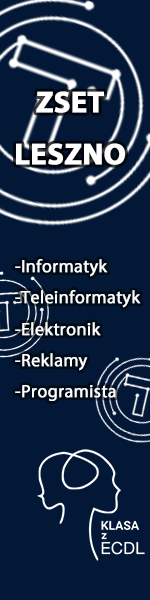
<style>
.page{position:relative;width:150px;height:600px;background:#031837}
.page>*{position:absolute;margin:0}
.t1{font:29.9px "MyriadPro-Bold";color:#ffffff;font-weight:bold}
.t2{font:17.9px "MyriadPro-Regular";color:#ffffff;font-weight:bold}
</style>
<div class="page">
<p class="t1" style="left:16px;top:91px;width:109px;height:74px;text-align:center">ZSET<br>LESZNO</p>
<p class="t2" style="left:15px;top:259px;width:126px;height:142px">-Informatyk<br>-Teleinformatyk<br>-Elektronik<br>-Reklamy<br>-Programista</p>
</div>
